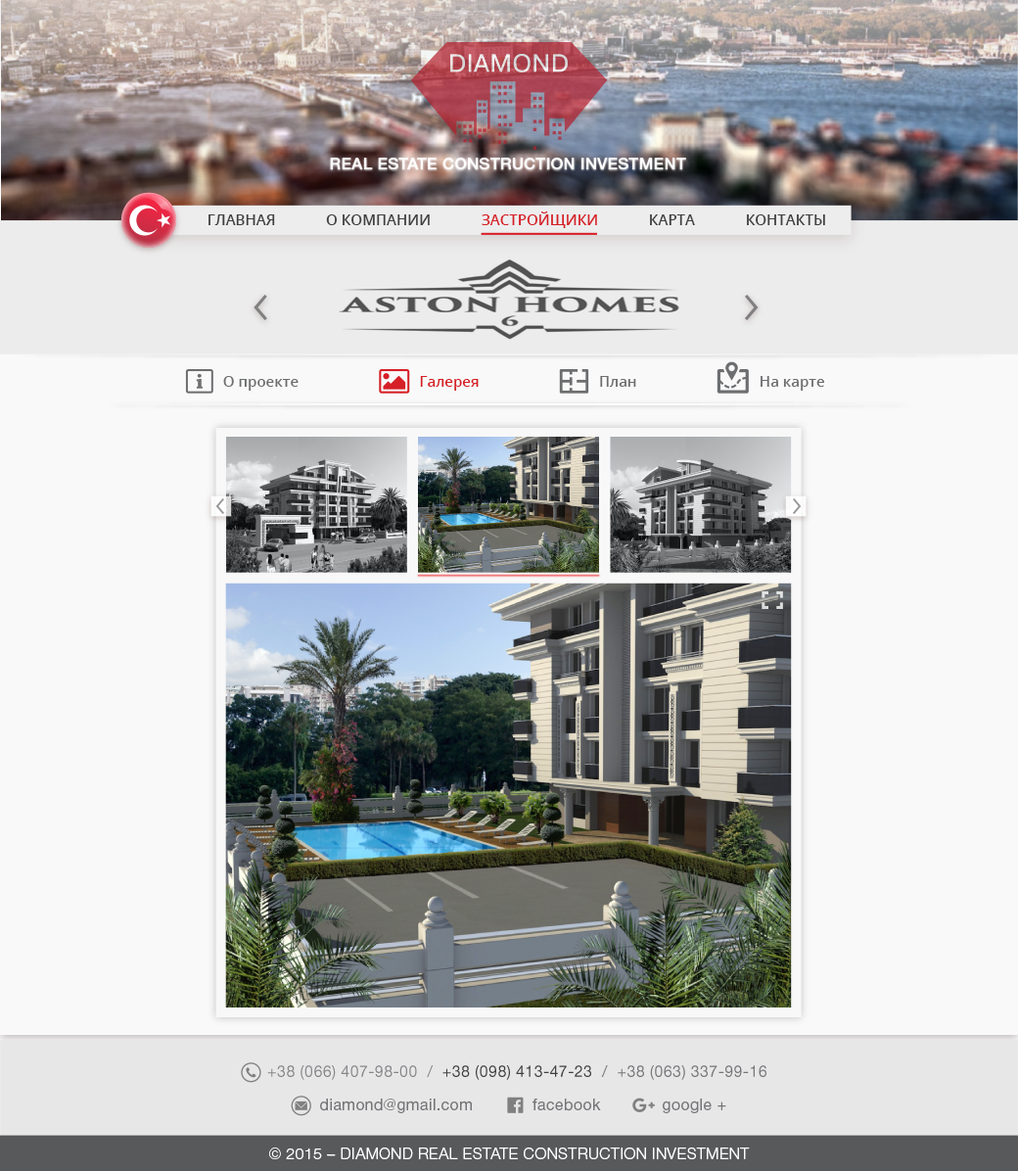
<style>
.page{position:relative;width:1018px;height:1171px;background:#f9f9f9}
.page>*{position:absolute;margin:0}
.t1{font:14.7px "OpenSans-Semibold";color:#404040;text-transform:uppercase}
.t2{font:14.7px "OpenSans-Semibold";color:#d61f26;text-transform:uppercase}
.t3{font:14.7px "OpenSans-Semibold";color:#6d6e70}
.t4{font:14.7px "OpenSans-Semibold";color:#d61f26}
.t5{font:15.7px "Helvetica-5-Normal";letter-spacing:0.025em;color:#757577}
.t6{font:15.7px "Helvetica-4-Light";letter-spacing:0.025em;color:#ffffff;text-transform:uppercase}
</style>
<div class="page">
<p class="t1" style="left:209px;top:214px;width:66px;height:11px">Главная</p>
<p class="t1" style="left:326px;top:214px;width:104px;height:11px">О компании</p>
<p class="t2" style="left:482px;top:211px;width:115px;height:17px">Застройщики</p>
<p class="t1" style="left:650px;top:214px;width:45px;height:11px">КАРТА</p>
<p class="t1" style="left:747px;top:214px;width:78px;height:11px">Контакты</p>
<p class="t3" style="left:223px;top:376px;width:76px;height:15px">О проекте</p>
<p class="t4" style="left:420px;top:376px;width:59px;height:15px">Галерея</p>
<p class="t3" style="left:600px;top:376px;width:36px;height:11px">План</p>
<p class="t3" style="left:761px;top:376px;width:63px;height:15px">На карте</p>
<p class="t5" style="left:320px;top:1099px;width:152px;height:14px">diamond@gmail.com</p>
<p class="t5" style="left:533px;top:1099px;width:68px;height:12px">facebook</p>
<p class="t5" style="left:663px;top:1099px;width:64px;height:14px">google +</p>
<p class="t6" style="left:269px;top:1148px;width:481px;height:11px">© 2015 – DIAMOND real estate construction investment</p>
</div>
